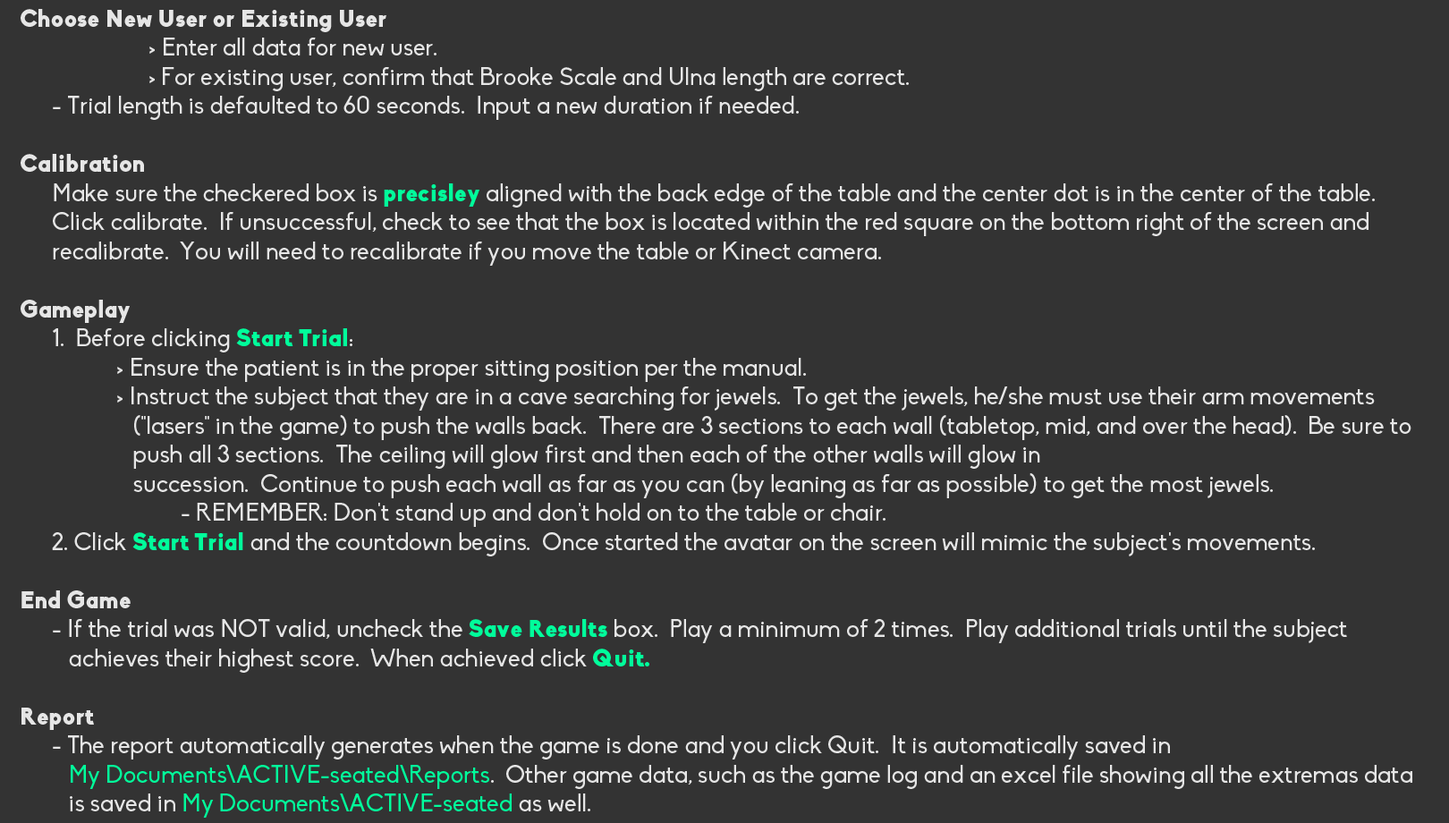
<style>
.page{position:relative;width:1449px;height:823px;background:#333333}
.page>*{position:absolute;margin:0}
.t1{font:24.2px "Biko";color:#e6e6e6}
.t2{font:24.2px "Biko-Black";color:#e6e6e6}
.t3{font:24.2px "Biko-Black";color:#00fe9b}
.t4{font:24.2px "Biko";color:#00fe9b}
</style>
<div class="page">
<p class="t1" style="left:21px;top:9px;width:1391px;height:809px"><span class="t2">Choose New User or Existing User</span><br>    &gt; Enter all data for new user.<br>    &gt; For existing user, confirm that Brooke Scale and Ulna length are correct.<br> - Trial length is defaulted to 60 seconds.  Input a new duration if needed.<br><br><span class="t2">Calibration<br></span> Make sure the checkered box is <span class="t3">precisley</span> aligned with the back edge of the table and the center dot is in the center of the table.  <br> Click calibrate.  If unsuccessful, check to see that the box is located within the red square on the bottom right of the screen and <br> recalibrate.  You will need to recalibrate if you move the table or Kinect camera.<br><br><span class="t2">Gameplay<br></span> 1.  Before clicking <span class="t3">Start Trial</span>:<br>   &gt; Ensure the patient is in the proper sitting position per the manual.<br>   &gt; Instruct the subject that they are in a cave searching for jewels.  To get the jewels, he/she must use their arm movements <br>      ("lasers" in the game) to push the walls back.  There are 3 sections to each wall (tabletop, mid, and over the head).  Be sure to <br>      push all 3 sections.  The ceiling will glow first and then each of the other walls will glow in <br>      succession.  Continue to push each wall as far as you can (by leaning as far as possible) to get the most jewels.<br>     - REMEMBER: Don't stand up and don't hold on to the table or chair.<br> 2. Click <span class="t3">Start Trial</span> and the countdown begins.  Once started the avatar on the screen will mimic the subject's movements.<br><br><span class="t2">End Game<br></span> - If the trial was NOT valid, uncheck the <span class="t3">Save Results</span> box.  Play a minimum of 2 times.  Play additional trials until the subject <br>    achieves their highest score.  When achieved click <span class="t3">Quit.<br></span><span class="t2"><br>Report<br></span> - The report automatically generates when the game is done and you click Quit.  It is automatically saved in <br>    <span class="t4">My Documents\ACTIVE-seated\Reports</span>.  Other game data, such as the game log and an excel file showing all the extremas data <br>    is saved in <span class="t4">My Documents\ACTIVE-seated</span> as well.</p>
</div>
